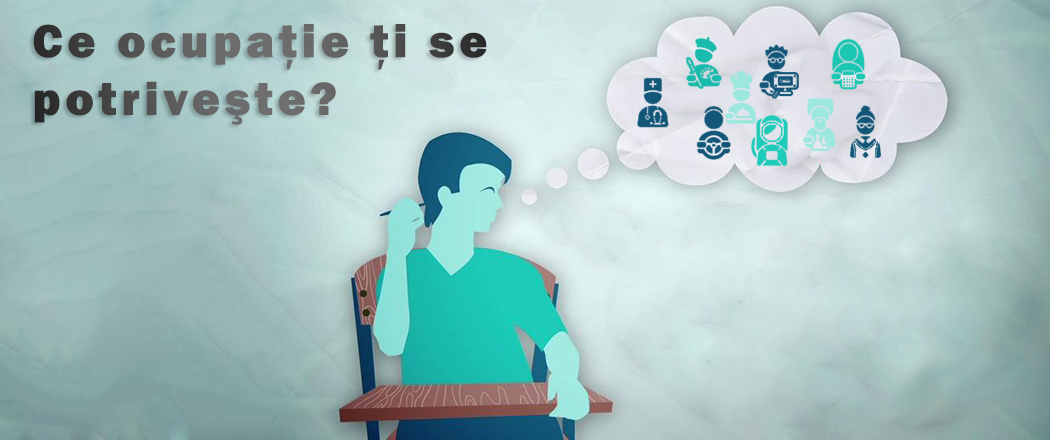
<style>
.page{position:relative;width:1050px;height:440px}
.page>*{position:absolute;margin:0}
.t1{font:48px "FranklinGothic-Heavy";letter-spacing:0.1em}
</style>
<div class="page">
<p class="t1" style="left:33px;top:24px;width:454px;height:101px">Ce ocupaţie ţi se<br>potriveşte?</p>
</div>
